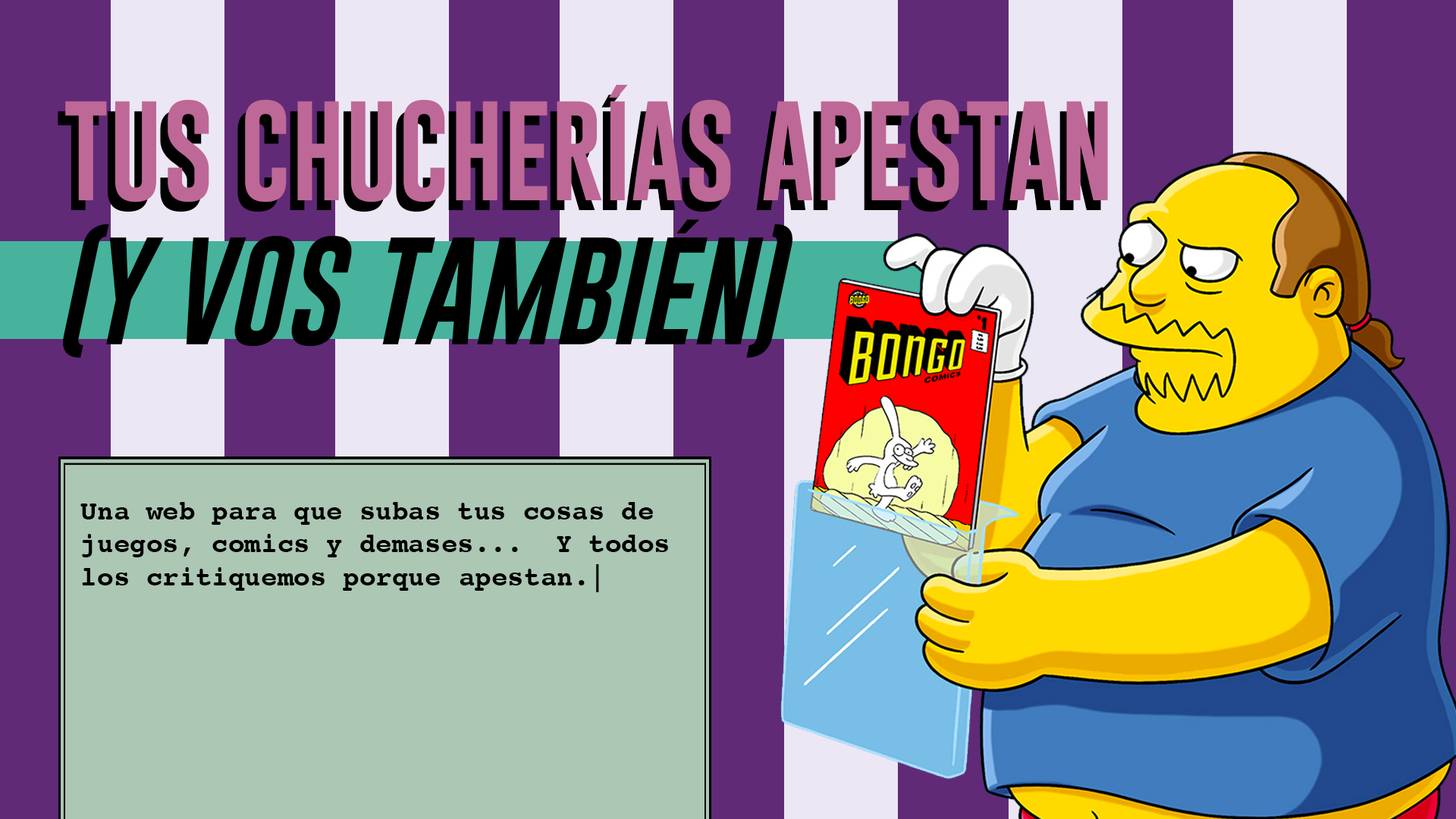
<style>
.page{position:relative;width:1456px;height:819px}
.page>*{position:absolute;margin:0}
.t1{font:103.1px "Gobold";color:#be6897}
.t2{font:103.1px "Gobold";color:#000000}
.t3{font:111.8px "Gobold-Italic";color:#000000}
.t4{font:27.3px "Courier-Bold";color:#000000}
</style>
<div class="page">
<p class="t1" style="left:65px;top:84px;width:1043px;height:118px">TUS CHUCHERÍAS APESTAN</p>
<p class="t2" style="left:58px;top:94px;width:1043px;height:264px">TUS CHUCHERÍAS APESTAN<br><span class="t3">(Y VOS TAMBIÉN)</span></p>
<p class="t4" style="left:80px;top:502px;width:588px;height:90px">Una web para que subas tus cosas de juegos, comics y demases...  Y todos los critiquemos porque apestan.|</p>
</div>
